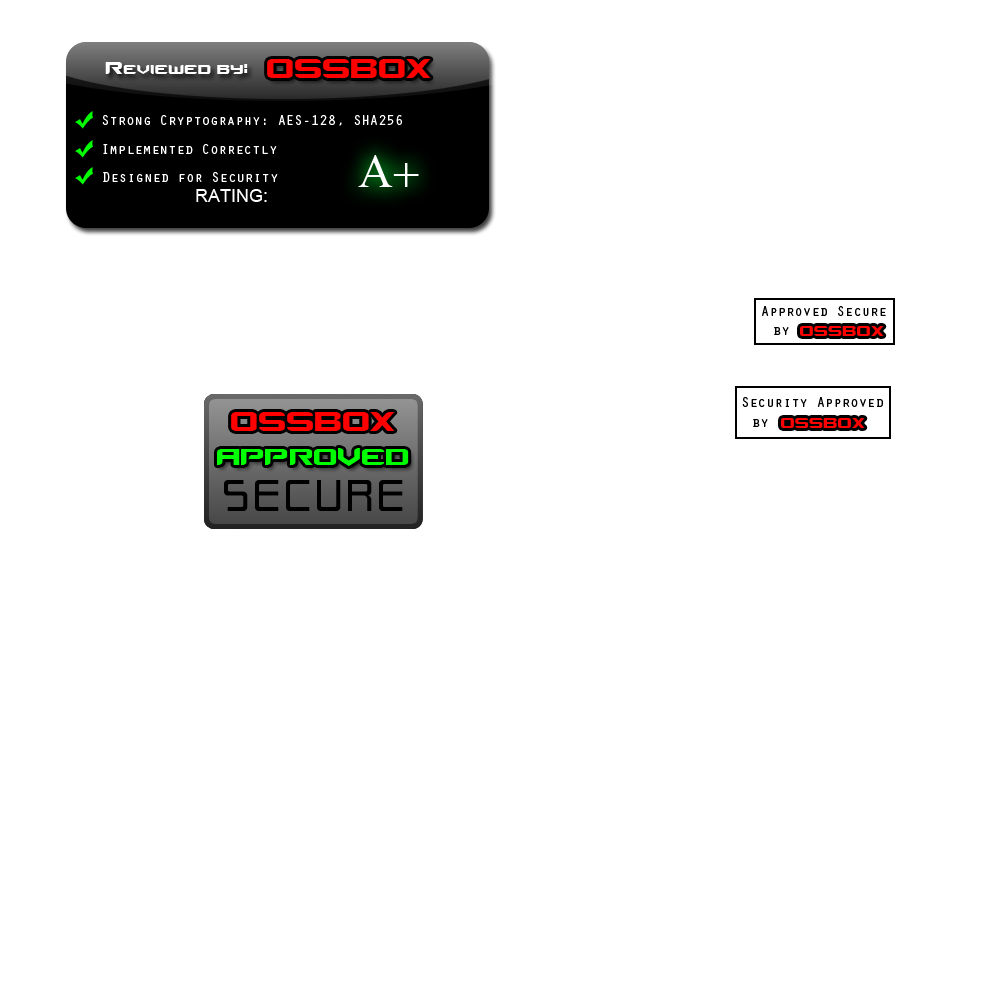
<style>
.page{position:relative;width:1000px;height:1000px;background:#ffffff}
.page>*{position:absolute;margin:0}
.t1{font:24px "Counter-StrikeRegular";color:#ffffff}
.t2{font:38px "Counter-StrikeRegular";color:#ff0000}
.t3{font:14px "OratorStd";color:#ffffff}
.t4{font:18px "ArialMT";color:#ffffff}
.t5{font:14px "OratorStd";color:#000000}
.t6{font:19.4px "Counter-StrikeRegular";color:#ff0000}
.t7{font:33px "Counter-StrikeRegular";color:#00ff00}
.t8{font:62px "Cynthe";color:#000000}
</style>
<div class="page">
<p class="t1" style="left:105px;top:62px;width:143px;height:12px">Reviewed by:</p>
<p class="t2" style="left:267px;top:59px;width:164px;height:19px">OSSBOX</p>
<p class="t3" style="left:102px;top:115px;width:300px;height:11px">Strong Cryptography: AES-128, SHA256</p>
<p class="t3" style="left:103px;top:144px;width:174px;height:10px">Implemented Correctly</p>
<p class="t3" style="left:103px;top:172px;width:175px;height:10px">Designed for Security</p>
<p class="t4" style="left:196px;top:189px;width:71px;height:13px">RATING:</p>
<p class="t5" style="left:762px;top:306px;width:124px;height:10px">Approved Secure</p>
<p class="t5" style="left:774px;top:327px;width:15px;height:8px">by</p>
<p class="t6" style="left:800px;top:326px;width:84px;height:10px">OSSBOX</p>
<p class="t5" style="left:742px;top:397px;width:141px;height:10px">Security Approved</p>
<p class="t2" style="left:231px;top:412px;width:164px;height:19px">OSSBOX</p>
<p class="t5" style="left:753px;top:419px;width:15px;height:8px">by</p>
<p class="t6" style="left:781px;top:418px;width:84px;height:10px">OSSBOX</p>
<p class="t7" style="left:217px;top:448px;width:192px;height:18px">APPROVED</p>
<p class="t8" style="left:224px;top:480px;width:179px;height:31px">SECURE</p>
</div>
